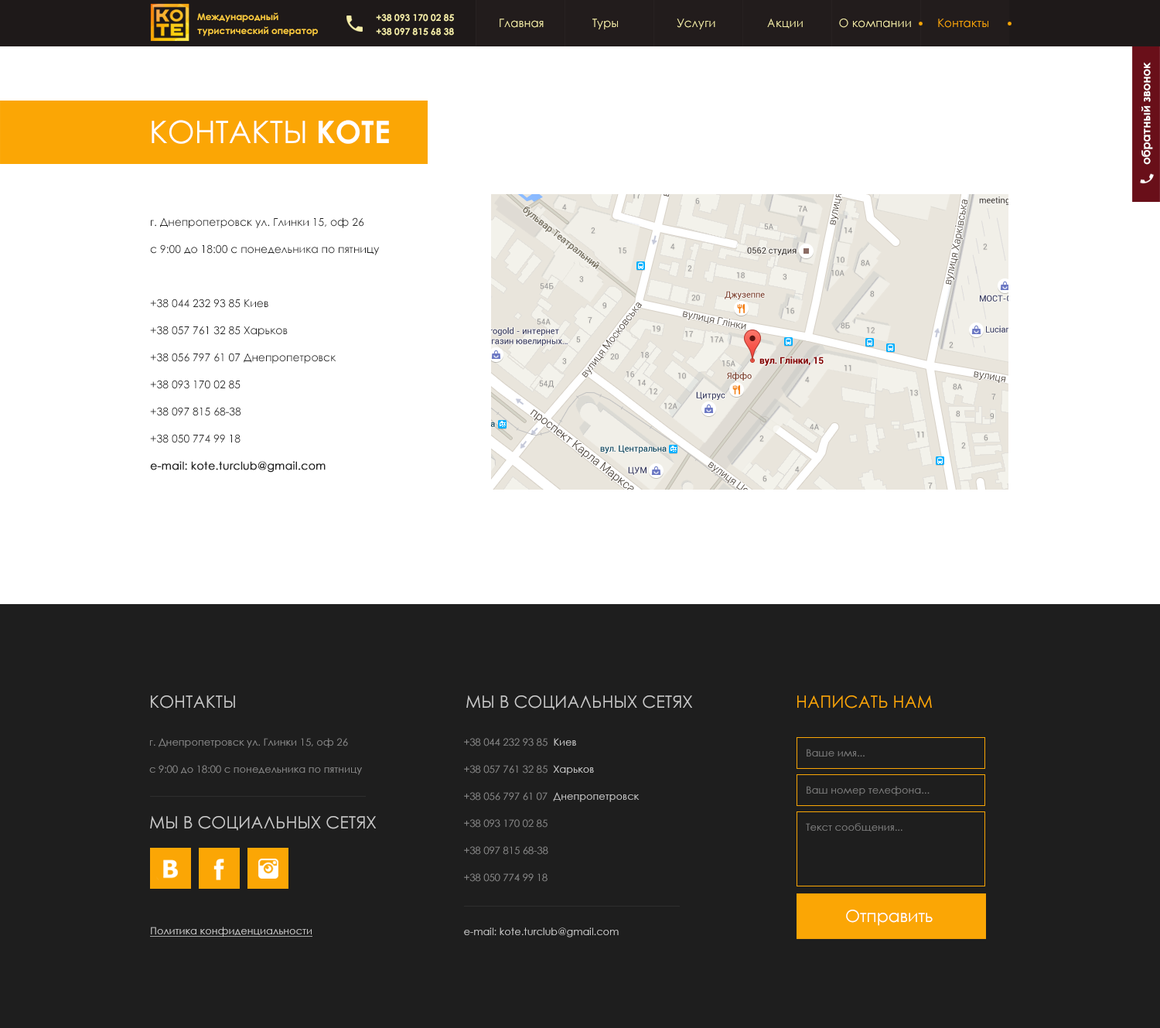
<style>
.page{position:relative;width:1160px;height:1028px;background:#ffffff}
.page>*{position:absolute;margin:0}
.t1{font:9.3px/13.9px "CenturyGothic-Bold";color:#fac93e}
.t2{font:9.3px/13.9px "CenturyGothic-Bold";color:#f6eea9}
.t3{font:11.6px "CenturyGothic";color:#f6eea9}
.t4{font:11.6px "CenturyGothic";color:#fba605}
.t5{font:11.6px "CenturyGothic-Bold";color:#ffffff}
.t6{font:30.9px "CenturyGothic";color:#ffffff;text-transform:uppercase}
.t7{font:30.9px "CenturyGothic-Bold";color:#ffffff}
.t8{font:10.8px/27.1px "CenturyGothic";color:#242424}
.t9{font:10.8px/27.1px "CenturyGothic";color:#242424;font-weight:bold}
.t10{font:17px "CenturyGothic";color:#c9c9c9;text-transform:uppercase}
.t11{font:17px "CenturyGothic";color:#fba605;text-transform:uppercase}
.t12{font:10.1px/27.1px "CenturyGothic";color:#888888}
.t13{font:10.1px/27.1px "CenturyGothic";color:#c9c9c9}
.t14{font:10.1px/12.4px "CenturyGothic";color:#7d7d7d}
.t15{font:17px "CenturyGothic";color:#ffffff}
.t16{font:10.1px "CenturyGothic";color:#c9c9c9;text-decoration:underline}
</style>
<div class="page">
<p class="t1" style="left:197px;top:12px;width:121px;height:24px">Международный <br>туристический оператор</p>
<p class="t2" style="left:376px;top:14px;width:78px;height:22px">+38 093 170 02 85<br>+38 097 815 68 38</p>
<p class="t3" style="left:500px;top:19px;width:488px;height:10px">Главная               Туры                  Услуги                Акции           О компании        <span class="t4">Контакты</span></p>
<p class="t5" style="left:1142px;top:62px;width:11px;height:103px;rotate:-90deg">обратный звонок</p>
<p class="t6" style="left:152px;top:120px;width:237px;height:24px">контакты <span class="t7">КОТЕ</span></p>
<p class="t8" style="left:150px;top:217px;width:230px;height:256px">г. Днепропетровск ул. Глинки 15, оф 26<br>с 9:00 до 18:00 с понедельника по пятницу<br><br>+38 044 232 93 85 Киев<br>+38 057 761 32 85 Харьков<br>+38 056 797 61 07 Днепропетровск<br>+38 093 170 02 85<br>+38 097 815 68-38<br>+38 050 774 99 18<br><span class="t9">e-mail: kote.turclub@gmail.com</span></p>
<p class="t10" style="left:151px;top:695px;width:84px;height:13px">контакты</p>
<p class="t10" style="left:466px;top:695px;width:226px;height:15px">Мы в социальных сетях</p>
<p class="t11" style="left:797px;top:695px;width:135px;height:13px">Написать нам</p>
<p class="t12" style="left:149px;top:738px;width:213px;height:37px">г. Днепропетровск ул. Глинки 15, оф 26<br>с 9:00 до 18:00 с понедельника по пятницу</p>
<p class="t12" style="left:464px;top:738px;width:176px;height:199px">+38 044 232 93 85  <span class="t13">Киев<br></span>+38 057 761 32 85  <span class="t13">Харьков<br></span>+38 056 797 61 07  <span class="t13">Днепропетровск<br></span>+38 093 170 02 85<br>+38 097 815 68-38<br>+38 050 774 99 18<br><br><span class="t13">e-mail: kote.turclub@gmail.com</span></p>
<p class="t14" style="left:806px;top:749px;width:124px;height:82px">Ваше имя...<br><br><br>Ваш номер телефона...<br><br><br>Текст сообщения...</p>
<p class="t10" style="left:150px;top:816px;width:226px;height:15px">Мы в социальных сетях</p>
<p class="t15" style="left:846px;top:910px;width:87px;height:16px">Отправить</p>
<p class="t16" style="left:150px;top:927px;width:162px;height:10px">Политика конфиденциальности</p>
</div>
